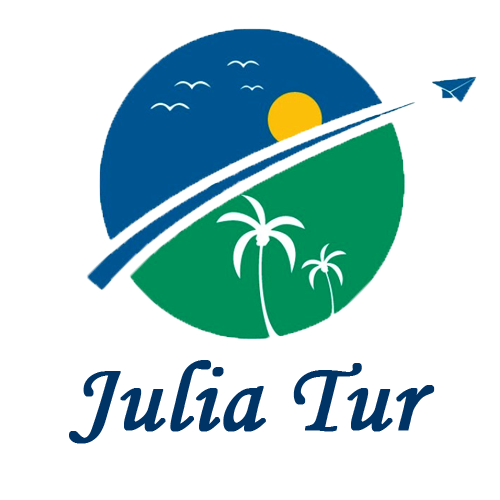
<style>
.page{position:relative;width:500px;height:500px;background:#ffffff}
.page>*{position:absolute;margin:0}
.t1{font:100px "MonotypeCorsiva";letter-spacing:0.005em;color:#003366;font-weight:bold}
</style>
<div class="page">
<p class="t1" style="left:69px;top:360px;width:366px;height:84px">Julia Tur</p>
</div>
